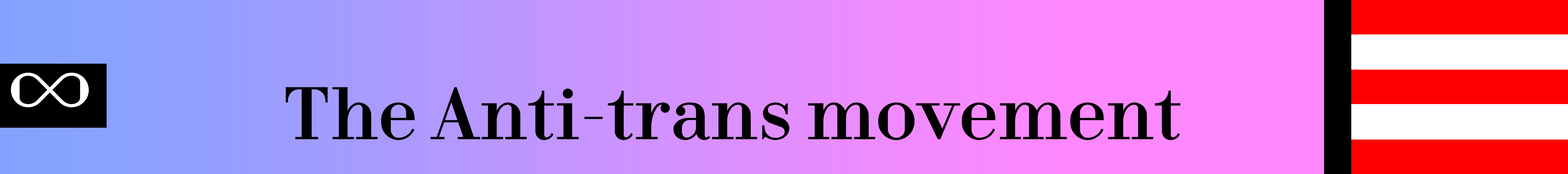
<style>
.page{position:relative;width:1568px;height:174px}
.page>*{position:absolute;margin:0}
.t1{font:99.5px "FinSerifDisplay-Regular";color:#ffffff;scale:1.29 1}
.t2{font:69.7px "FinSerifDisplay-Regular";color:#000000}
</style>
<div class="page">
<p class="t1" style="left:11px;top:72px;width:78px;height:36px">∞</p>
<p class="t2" style="left:286px;top:87px;width:895px;height:53px">The Anti-trans movement</p>
</div>
